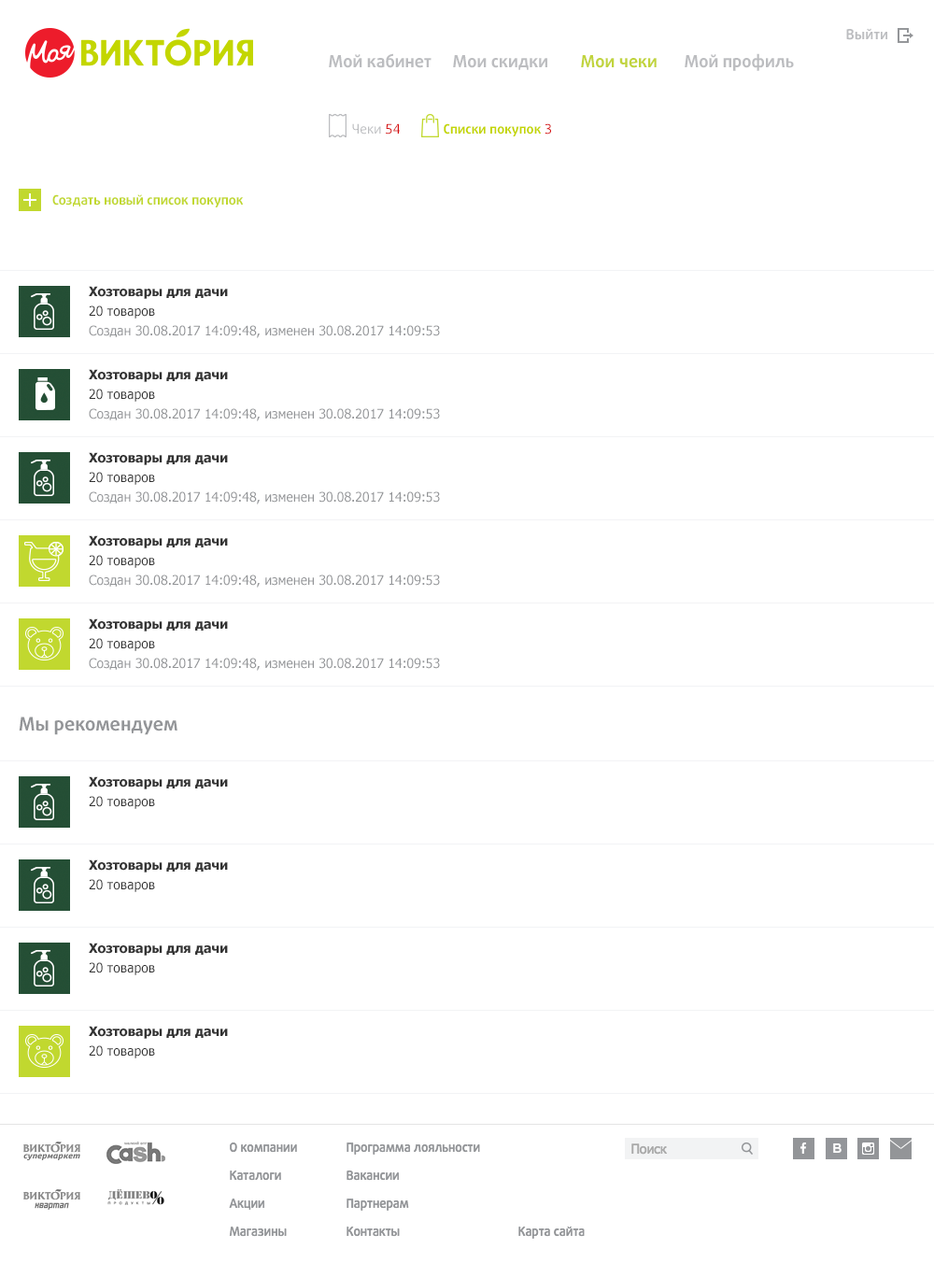
<style>
.page{position:relative;width:934px;height:1277px;background:#ffffff}
.page>*{position:absolute;margin:0}
.t1{font:14px "DaxlineOffcPro-Bold";color:#bcbdc0}
.t2{font:16.8px "DaxlineOffcPro-Bold";color:#bcbdc0}
.t3{font:16.8px "DaxlineOffcPro-Bold";color:#c1d43c}
.t4{font:13.1px "DaxlineOffcPro";color:#bcbdc0}
.t5{font:13.1px "DaxlineOffcPro";color:#d6090b}
.t6{font:13.1px "DaxlineOffcPro-Bold";color:#c4d600}
.t7{font:13.1px "DaxlinePro-Bold";color:#c1d82f}
.t8{font:13.1px "Tahoma-Bold";color:#333333}
.t9{font:13.1px "Tahoma";color:#333333}
.t10{font:13.1px "Tahoma";color:#939598}
.t11{font:18.7px "DaxlinePro-Bold";color:#939598}
</style>
<div class="page">
<p class="t1" style="left:846px;top:28px;width:41px;height:12px">Выйти</p>
<p class="t2" style="left:329px;top:53px;width:102px;height:15px">Мой кабинет</p>
<p class="t2" style="left:685px;top:53px;width:109px;height:18px">Мой профиль</p>
<p class="t2" style="left:453px;top:55px;width:94px;height:15px">Мои скидки</p>
<p class="t3" style="left:581px;top:55px;width:76px;height:13px">Мои чеки</p>
<p class="t4" style="left:352px;top:123px;width:48px;height:11px">Чеки <span class="t5">54</span></p>
<p class="t6" style="left:444px;top:123px;width:107px;height:13px">Списки покупок <span class="t5">3</span></p>
<p class="t7" style="left:52px;top:194px;width:192px;height:13px">Создать новый список покупок</p>
<p class="t8" style="left:89px;top:286px;width:139px;height:13px">Хозтовары для дачи</p>
<p class="t9" style="left:89px;top:305px;width:66px;height:13px">20 товаров</p>
<p class="t10" style="left:89px;top:325px;width:351px;height:13px">Создан 30.08.2017 14:09:48, изменен 30.08.2017 14:09:53</p>
<p class="t8" style="left:89px;top:369px;width:139px;height:13px">Хозтовары для дачи</p>
<p class="t9" style="left:89px;top:389px;width:66px;height:13px">20 товаров</p>
<p class="t10" style="left:89px;top:408px;width:351px;height:13px">Создан 30.08.2017 14:09:48, изменен 30.08.2017 14:09:53</p>
<p class="t8" style="left:89px;top:452px;width:139px;height:13px">Хозтовары для дачи</p>
<p class="t9" style="left:89px;top:472px;width:66px;height:13px">20 товаров</p>
<p class="t10" style="left:89px;top:491px;width:351px;height:13px">Создан 30.08.2017 14:09:48, изменен 30.08.2017 14:09:53</p>
<p class="t8" style="left:89px;top:535px;width:139px;height:13px">Хозтовары для дачи</p>
<p class="t9" style="left:89px;top:555px;width:66px;height:13px">20 товаров</p>
<p class="t10" style="left:89px;top:574px;width:351px;height:13px">Создан 30.08.2017 14:09:48, изменен 30.08.2017 14:09:53</p>
<p class="t8" style="left:89px;top:618px;width:139px;height:13px">Хозтовары для дачи</p>
<p class="t9" style="left:89px;top:638px;width:66px;height:13px">20 товаров</p>
<p class="t10" style="left:89px;top:658px;width:351px;height:13px">Создан 30.08.2017 14:09:48, изменен 30.08.2017 14:09:53</p>
<p class="t11" style="left:19px;top:716px;width:158px;height:19px">Мы рекомендуем</p>
<p class="t8" style="left:89px;top:776px;width:139px;height:13px">Хозтовары для дачи</p>
<p class="t9" style="left:89px;top:796px;width:66px;height:13px">20 товаров</p>
<p class="t8" style="left:89px;top:859px;width:139px;height:13px">Хозтовары для дачи</p>
<p class="t9" style="left:89px;top:879px;width:66px;height:13px">20 товаров</p>
<p class="t8" style="left:89px;top:942px;width:139px;height:13px">Хозтовары для дачи</p>
<p class="t9" style="left:89px;top:962px;width:66px;height:13px">20 товаров</p>
<p class="t8" style="left:89px;top:1025px;width:139px;height:14px">Хозтовары для дачи</p>
<p class="t9" style="left:89px;top:1045px;width:66px;height:13px">20 товаров</p>
</div>
